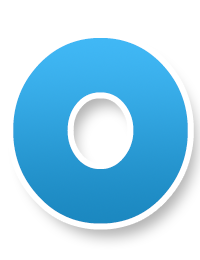
<style>
.page{position:relative;width:200px;height:260px;background:#ffffff}
.page>*{position:absolute;margin:0}
.t1{font:300px "BerlinSansFBDemi-Bold";color:#2ea0db}
</style>
<div class="page">
<p class="t1" style="left:13px;top:38px;width:175px;height:186px">0</p>
</div>
